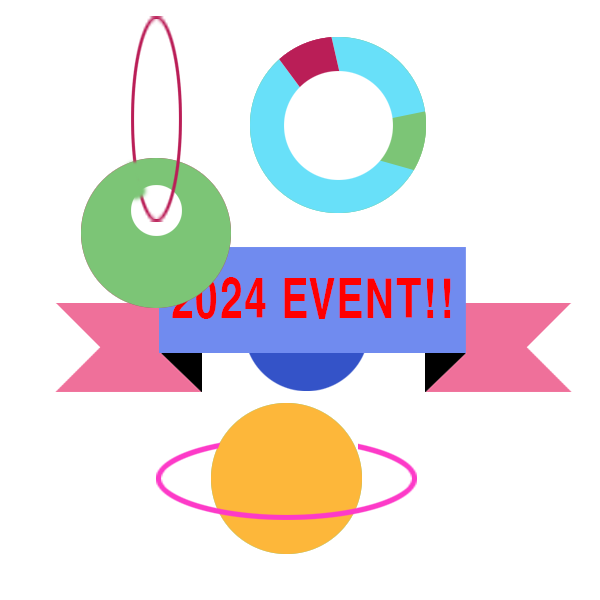
<style>
.page{position:relative;width:600px;height:600px;background:#ffffff}
.page>*{position:absolute;margin:0}
.t1{font:51.6px "H2gtrE";color:#ff0000;scale:0.76 1}
</style>
<div class="page">
<p class="t1" style="left:172px;top:277px;width:279px;height:42px">2024 EVENT!!</p>
</div>
